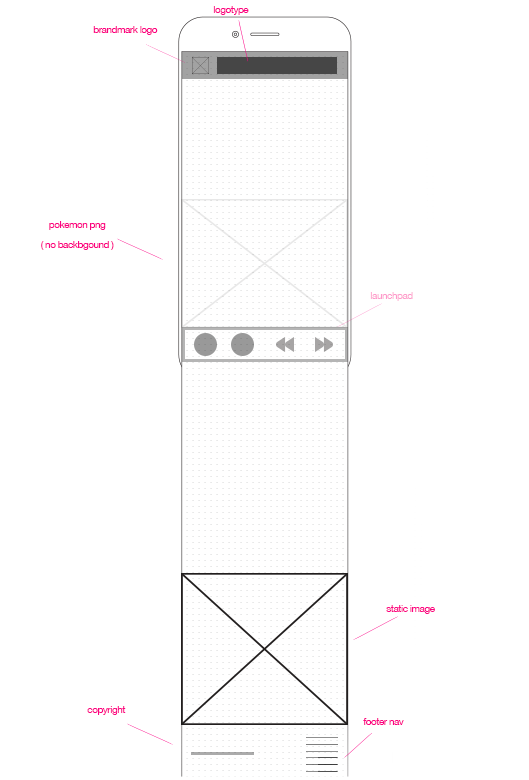
<style>
.page{position:relative;width:529px;height:780px;background:#ffffff}
.page>*{position:absolute;margin:0}
.t1{font:10px "HelveticaNeue";letter-spacing:-0.05em;color:#fc0183}
.t2{font:10px/20.1px "HelveticaNeue";letter-spacing:-0.05em;color:#fc0183}
.t3{font:10px "HelveticaNeue";letter-spacing:-0.05em;color:#fe99cd}
</style>
<div class="page">
<p class="t1" style="left:213px;top:6px;width:36px;height:9px">logotype</p>
<p class="t1" style="left:93px;top:26px;width:65px;height:9px">brandmark logo</p>
<p class="t2" style="left:41px;top:221px;width:73px;height:29px;text-align:center">pokemon png<br>( no backbgound )</p>
<p class="t3" style="left:370px;top:292px;width:43px;height:9px">launchpad</p>
<p class="t1" style="left:386px;top:605px;width:49px;height:9px">static image</p>
<p class="t1" style="left:87px;top:706px;width:39px;height:9px">copyright</p>
<p class="t1" style="left:363px;top:718px;width:41px;height:7px">footer nav</p>
</div>
